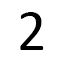
<style>
.page{position:relative;width:64px;height:64px;background:#ffffff}
.page>*{position:absolute;margin:0}
.t1{font:58.3px "Calibri";color:#000000}
</style>
<div class="page">
<p class="t1" style="left:20px;top:12px;width:24px;height:38px">2</p>
</div>
